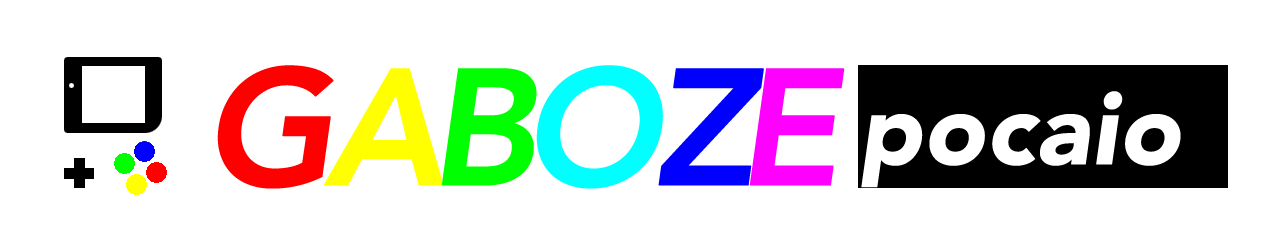
<style>
.page{position:relative;width:1280px;height:250px;background:#ffffff}
.page>*{position:absolute;margin:0}
.t1{font:164px "Avenir-HeavyOblique";color:#ff0000;font-weight:bold}
.t2{font:164px "Avenir-HeavyOblique";color:#00ffff;font-weight:bold}
.t3{font:164px "Avenir-HeavyOblique";color:#ffff00;font-weight:bold}
.t4{font:164px "Avenir-HeavyOblique";color:#00ff00;font-weight:bold}
.t5{font:164px "Avenir-HeavyOblique";color:#0000ff;font-weight:bold}
.t6{font:164px "Avenir-HeavyOblique";color:#ff00ff;font-weight:bold}
</style>
<div class="page">
<p class="t1" style="left:217px;top:65px;width:117px;height:124px">G</p>
<p class="t2" style="left:536px;top:65px;width:127px;height:124px">O</p>
<p class="t3" style="left:324px;top:68px;width:120px;height:118px">A</p>
<p class="t4" style="left:441px;top:68px;width:96px;height:118px">B</p>
<p class="t5" style="left:658px;top:68px;width:106px;height:118px">Z</p>
<p class="t6" style="left:749px;top:68px;width:96px;height:118px">E</p>
</div>
